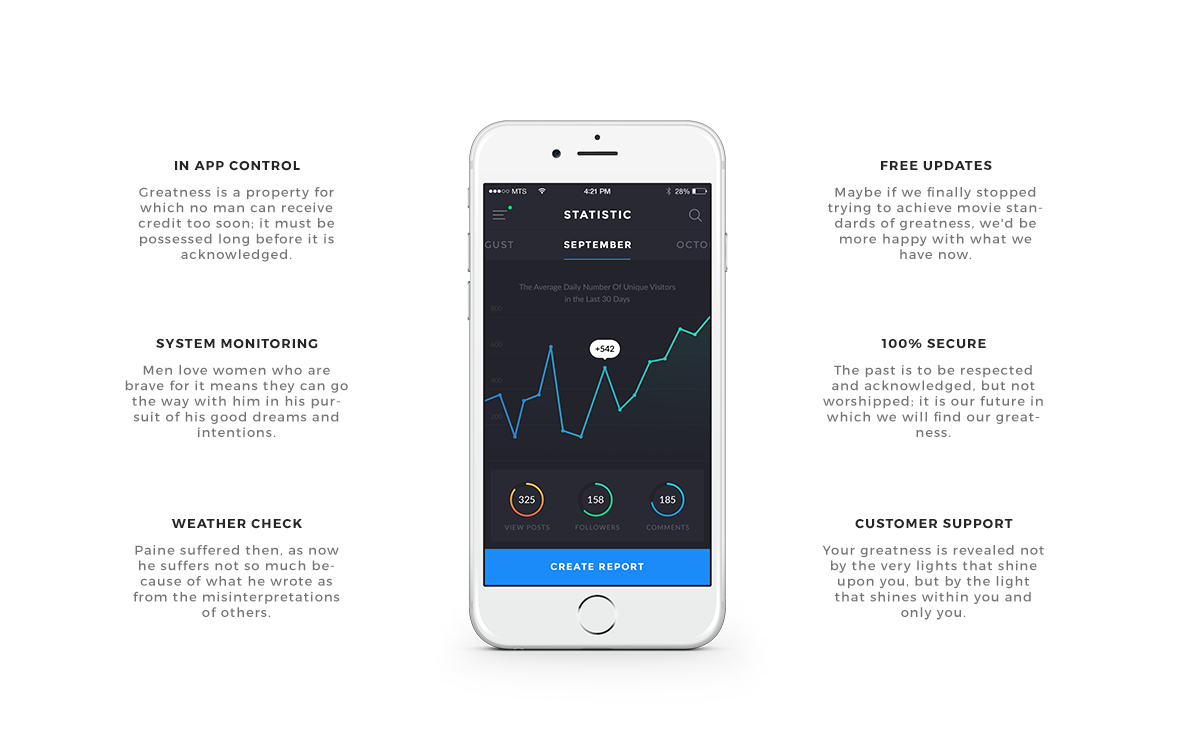
<style>
.page{position:relative;width:1200px;height:750px;background:#ffffff}
.page>*{position:absolute;margin:0}
.t1{font:13px "Montserrat-Bold";letter-spacing:0.08em;color:#242526;text-transform:uppercase}
.t2{font:13px "Montserrat-Regular";letter-spacing:0.08em;color:#747474}
</style>
<div class="page">
<p class="t1" style="left:175px;top:161px;width:125px;height:10px">in app control</p>
<p class="t1" style="left:881px;top:160px;width:111px;height:11px">free updates</p>
<p class="t2" style="left:138px;top:187px;width:196px;height:75px;text-align:center">Greatness is a property for which no man can receive credit too soon; it must be possessed long before it is acknowledged.</p>
<p class="t2" style="left:828px;top:187px;width:214px;height:73px;text-align:center">Maybe if we finally stopped trying to achieve movie standards of greatness, we'd be more happy with what we have now.</p>
<p class="t1" style="left:156px;top:338px;width:162px;height:11px">system monitoring</p>
<p class="t1" style="left:881px;top:338px;width:105px;height:11px">100% secure</p>
<p class="t2" style="left:125px;top:365px;width:223px;height:73px;text-align:center">Men love women who are brave for it means they can go the way with him in his pursuit of his good dreams and intentions.</p>
<p class="t2" style="left:823px;top:365px;width:220px;height:73px;text-align:center">The past is to be respected and acknowledged, but not worshipped; it is our future in which we will find our greatness.</p>
<p class="t1" style="left:171px;top:519px;width:131px;height:10px">weather check</p>
<p class="t1" style="left:855px;top:518px;width:158px;height:11px">customer support</p>
<p class="t2" style="left:133px;top:545px;width:207px;height:73px;text-align:center">Paine suffered then, as now he suffers not so much because of what he wrote as from the misinterpretations of others.</p>
<p class="t2" style="left:822px;top:545px;width:222px;height:75px;text-align:center">Your greatness is revealed not by the very lights that shine upon you, but by the light that shines within you and only you.</p>
</div>
